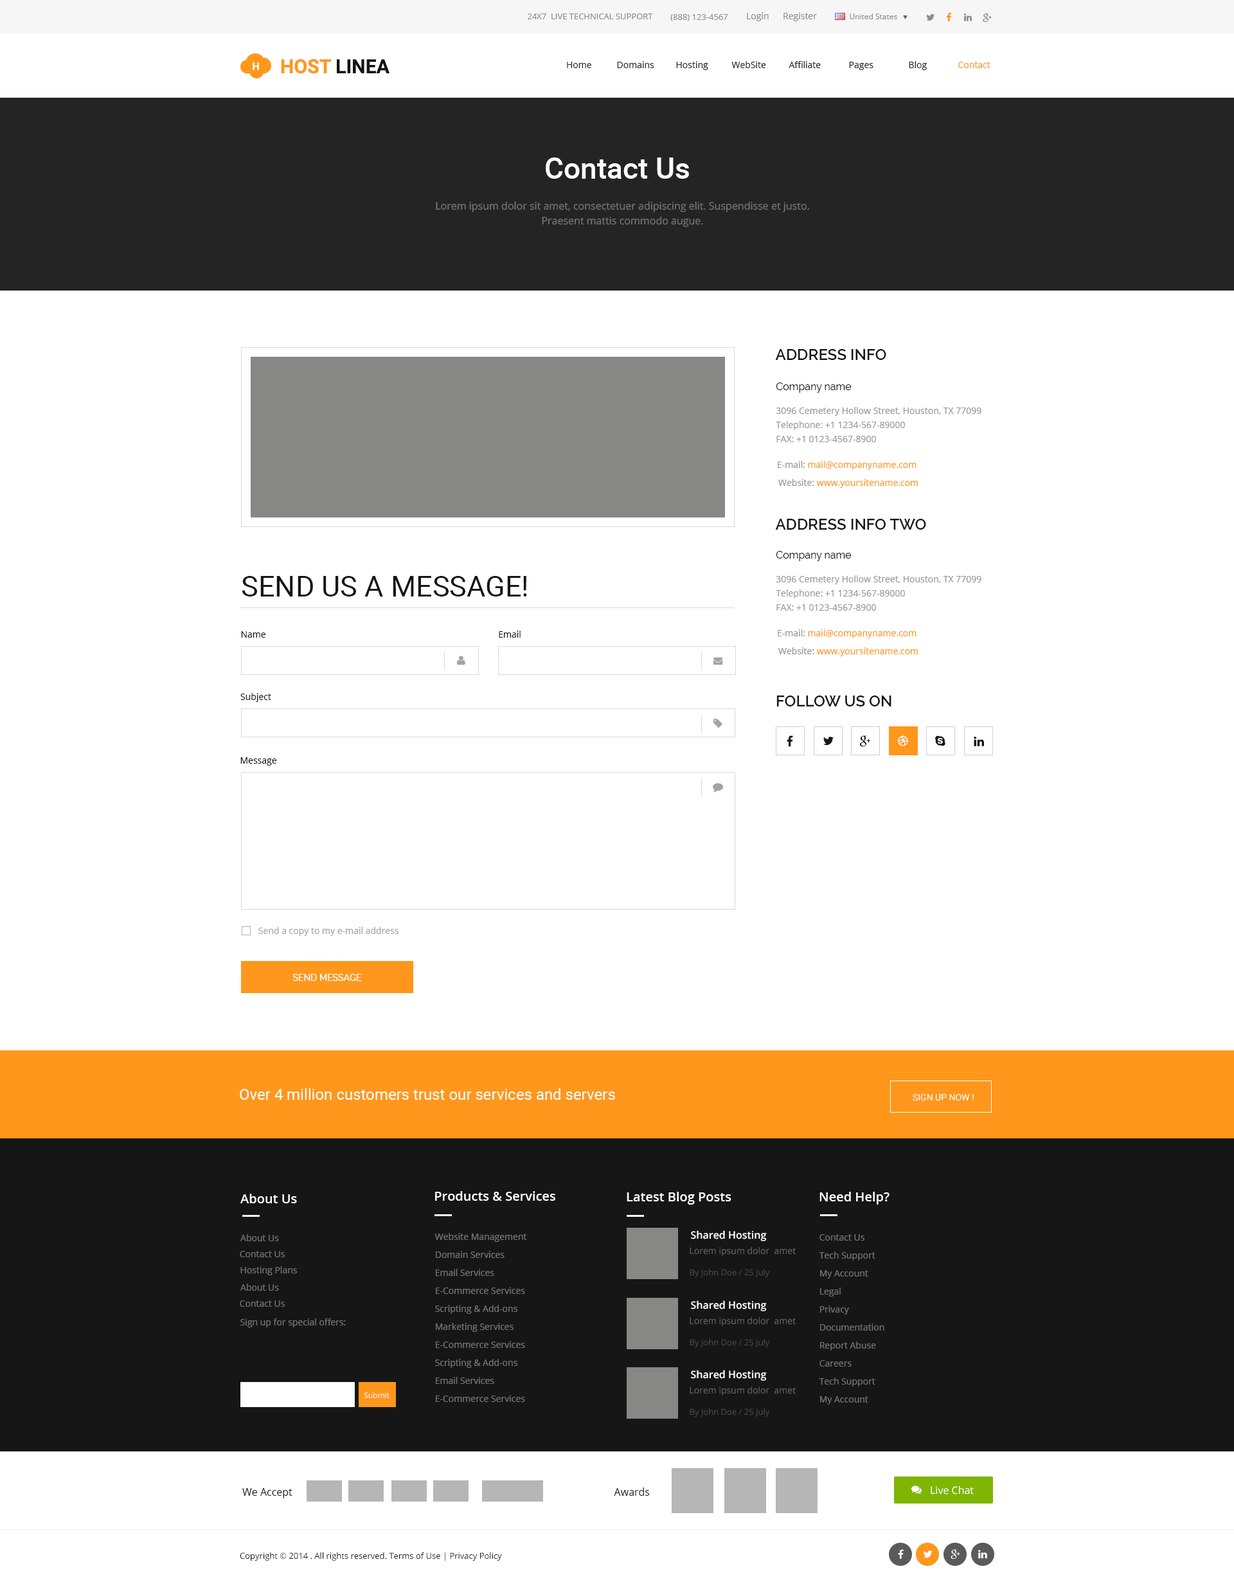
<style>
.page{position:relative;width:1234px;height:1580px;background:#ffffff}
.page>*{position:absolute;margin:0}
.t1{font:8.4px "OpenSans";color:#8d8c8c;text-transform:uppercase}
.t2{font:8.4px "OpenSans";color:#8d8d8d;text-transform:uppercase}
.t3{font:9px "OpenSans";color:#8d8d8d}
.t4{font:7.7px "OpenSans";color:#8d8d8d}
.t5{font:10.3px "OpenSans-Bold";color:#ffffff;text-transform:uppercase}
.t6{font:19.3px "Roboto-Bold";color:#141414;text-transform:uppercase}
.t7{font:19.3px "Roboto-Bold";color:#ff971c;text-transform:uppercase}
.t8{font:9px "OpenSans";color:#272727}
.t9{font:9px "OpenSans";color:#242424}
.t10{font:9px "OpenSans";color:#ff971c}
.t11{font:29.6px "Roboto-Medium";color:#ffffff}
.t12{font:10.3px/14.8px "OpenSans";color:#727272}
.t13{font:15.4px "Raleway-SemiBold";color:#161616;text-transform:uppercase}
.t14{font:10.3px "Raleway";color:#161616}
.t15{font:9px/14.1px "OpenSans";color:#969696}
.t16{font:9px "OpenSans";color:#969696}
.t17{font:28.9px "Roboto-Regular";color:#161616;text-transform:uppercase}
.t18{font:9px "OpenSans";color:#161616}
.t19{font:9px "OpenSans";color:#a4a4a4}
.t20{font:9px "Raleway-Medium";color:#ffffff;text-transform:uppercase}
.t21{font:15.4px "Roboto-Regular";color:#ffffff}
.t22{font:9px "Roboto-Regular";color:#ffffff;text-transform:uppercase}
.t23{font:12.9px "OpenSans-Semibold";color:#ffffff}
.t24{font:9px "OpenSans";color:#737373}
.t25{font:9px/18px "OpenSans";color:#737373}
.t26{font:10.3px "OpenSans-Semibold";color:#ffffff}
.t27{font:9px "OpenSans";color:#666666}
.t28{font:8.4px "OpenSans";color:#494747}
.t29{font:7.7px "OpenSans";color:#ffffff}
.t30{font:10.3px "OpenSans";color:#161616}
.t31{font:10.3px "OpenSans";color:#ffffff}
.t32{font:8.4px "OpenSans";color:#161616}
</style>
<div class="page">
<p class="t1" style="left:528px;top:14px;width:125px;height:5px">24x7  live Technical Support</p>
<p class="t2" style="left:670px;top:14px;width:58px;height:7px">(888) 123-4567</p>
<p class="t3" style="left:747px;top:12px;width:22px;height:9px">Login</p>
<p class="t3" style="left:784px;top:12px;width:33px;height:9px">Register</p>
<p class="t4" style="left:850px;top:14px;width:47px;height:5px">United States</p>
<p class="t5" style="left:253px;top:62px;width:6px;height:8px">H</p>
<p class="t6" style="left:281px;top:59px;width:109px;height:15px"><span class="t7">Host</span> linea</p>
<p class="t8" style="left:567px;top:62px;width:24px;height:6px">Home</p>
<p class="t9" style="left:617px;top:61px;width:37px;height:7px">Domains</p>
<p class="t8" style="left:676px;top:61px;width:32px;height:9px">Hosting</p>
<p class="t9" style="left:732px;top:61px;width:34px;height:7px">WebSite</p>
<p class="t9" style="left:789px;top:61px;width:32px;height:7px">Affiliate</p>
<p class="t9" style="left:849px;top:62px;width:25px;height:8px">Pages</p>
<p class="t9" style="left:909px;top:61px;width:18px;height:9px">Blog</p>
<p class="t10" style="left:959px;top:62px;width:32px;height:6px">Contact</p>
<p class="t11" style="left:546px;top:158px;width:143px;height:21px">Contact Us</p>
<p class="t12" style="left:436px;top:201px;width:373px;height:26px;text-align:center">Lorem ipsum dolor sit amet, consectetuer adipiscing elit. Suspendisse et justo. Praesent mattis commodo augue.</p>
<p class="t13" style="left:775px;top:349px;width:112px;height:11px">Address Info</p>
<p class="t14" style="left:776px;top:382px;width:76px;height:11px">Company name</p>
<p class="t15" style="left:776px;top:407px;width:206px;height:35px">3096 Cemetery Hollow Street, Houston, TX 77099<br>Telephone: +1 1234-567-89000<br>FAX: +1 0123-4567-8900</p>
<p class="t10" style="left:778px;top:461px;width:139px;height:9px"><span class="t16">E-mail: </span>mail@companyname.com</p>
<p class="t10" style="left:779px;top:479px;width:139px;height:9px"><span class="t16">Website: </span>www.yoursitename.com</p>
<p class="t13" style="left:775px;top:519px;width:151px;height:11px">Address Info Two</p>
<p class="t14" style="left:776px;top:551px;width:76px;height:10px">Company name</p>
<p class="t17" style="left:242px;top:576px;width:285px;height:21px">SEND US A Message!</p>
<p class="t15" style="left:776px;top:575px;width:206px;height:36px">3096 Cemetery Hollow Street, Houston, TX 77099<br>Telephone: +1 1234-567-89000<br>FAX: +1 0123-4567-8900</p>
<p class="t10" style="left:778px;top:629px;width:139px;height:9px"><span class="t16">E-mail: </span>mail@companyname.com</p>
<p class="t18" style="left:241px;top:631px;width:25px;height:7px">Name</p>
<p class="t18" style="left:499px;top:631px;width:22px;height:7px">Email</p>
<p class="t10" style="left:779px;top:647px;width:139px;height:9px"><span class="t16">Website: </span>www.yoursitename.com</p>
<p class="t18" style="left:240px;top:693px;width:31px;height:9px">Subject</p>
<p class="t13" style="left:777px;top:696px;width:115px;height:10px">Follow us on</p>
<p class="t18" style="left:240px;top:757px;width:36px;height:9px">Message</p>
<p class="t19" style="left:258px;top:927px;width:141px;height:9px">Send a copy to my e-mail address</p>
<p class="t20" style="left:292px;top:974px;width:70px;height:7px">Send Message</p>
<p class="t21" style="left:240px;top:1088px;width:375px;height:12px">Over 4 million customers trust our services and servers</p>
<p class="t22" style="left:913px;top:1094px;width:61px;height:7px">sign up now !</p>
<p class="t23" style="left:240px;top:1194px;width:57px;height:9px">About Us</p>
<p class="t23" style="left:435px;top:1191px;width:120px;height:10px">Products &amp; Services</p>
<p class="t23" style="left:627px;top:1192px;width:105px;height:13px">Latest Blog Posts</p>
<p class="t23" style="left:820px;top:1192px;width:70px;height:13px">Need Help?</p>
<p class="t24" style="left:240px;top:1234px;width:39px;height:7px">About Us</p>
<p class="t25" style="left:435px;top:1233px;width:92px;height:169px">Website Management<br>    Domain Services<br>    Email Services<br>    E-Commerce Services<br>    Scripting &amp; Add-ons<br>    Marketing Services<br>    E-Commerce Services<br>    Scripting &amp; Add-ons<br>    Email Services<br>    E-Commerce Services</p>
<p class="t26" style="left:691px;top:1230px;width:76px;height:11px">Shared Hosting</p>
<p class="t25" style="left:819px;top:1234px;width:66px;height:171px">Contact Us<br>    Tech Support<br>    My Account<br>    Legal<br>    Privacy<br>    Documentation<br>    Report Abuse<br>    Careers<br>    Tech Support<br>    My Account</p>
<p class="t24" style="left:240px;top:1251px;width:45px;height:6px">Contact Us</p>
<p class="t27" style="left:690px;top:1247px;width:106px;height:9px">Lorem ipsum dolor  amet</p>
<p class="t24" style="left:240px;top:1266px;width:57px;height:9px">Hosting Plans</p>
<p class="t28" style="left:690px;top:1269px;width:80px;height:8px">By John Doe / 25 July</p>
<p class="t24" style="left:240px;top:1284px;width:39px;height:7px">About Us</p>
<p class="t24" style="left:240px;top:1300px;width:45px;height:7px">Contact Us</p>
<p class="t26" style="left:691px;top:1300px;width:76px;height:11px">Shared Hosting</p>
<p class="t24" style="left:240px;top:1318px;width:106px;height:10px">Sign up for special offers:</p>
<p class="t27" style="left:690px;top:1317px;width:106px;height:9px">Lorem ipsum dolor  amet</p>
<p class="t28" style="left:690px;top:1339px;width:80px;height:8px">By John Doe / 25 July</p>
<p class="t26" style="left:691px;top:1370px;width:76px;height:11px">Shared Hosting</p>
<p class="t29" style="left:364px;top:1392px;width:26px;height:6px">Submit</p>
<p class="t27" style="left:690px;top:1387px;width:106px;height:9px">Lorem ipsum dolor  amet</p>
<p class="t28" style="left:690px;top:1408px;width:80px;height:9px">By John Doe / 25 July</p>
<p class="t30" style="left:242px;top:1488px;width:50px;height:10px">We Accept</p>
<p class="t30" style="left:614px;top:1488px;width:36px;height:8px">Awards</p>
<p class="t31" style="left:931px;top:1486px;width:43px;height:9px">Live Chat</p>
<p class="t32" style="left:240px;top:1553px;width:262px;height:8px">Copyright © 2014 . All rights reserved. Terms of Use | Privacy Policy</p>
</div>
